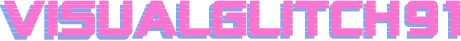
<style>
.page{position:relative;width:461px;height:41px;background:#ff71ce}
.page>*{position:absolute;margin:0}
.t1{font:48.7px "SFAlienEncounters";font-weight:bold;scale:1.09 1}
.t2{font:48.7px "SFAlienEncounters";color:#ff71ce;font-weight:bold;scale:1.09 1}
</style>
<div class="page">
<p class="t1" style="left:0px;top:3px;width:458px;height:37px">VISUALGLITCH91</p>
<p class="t2" style="left:3px;top:0px;width:458px;height:36px">VISUALGLITCH91</p>
</div>
